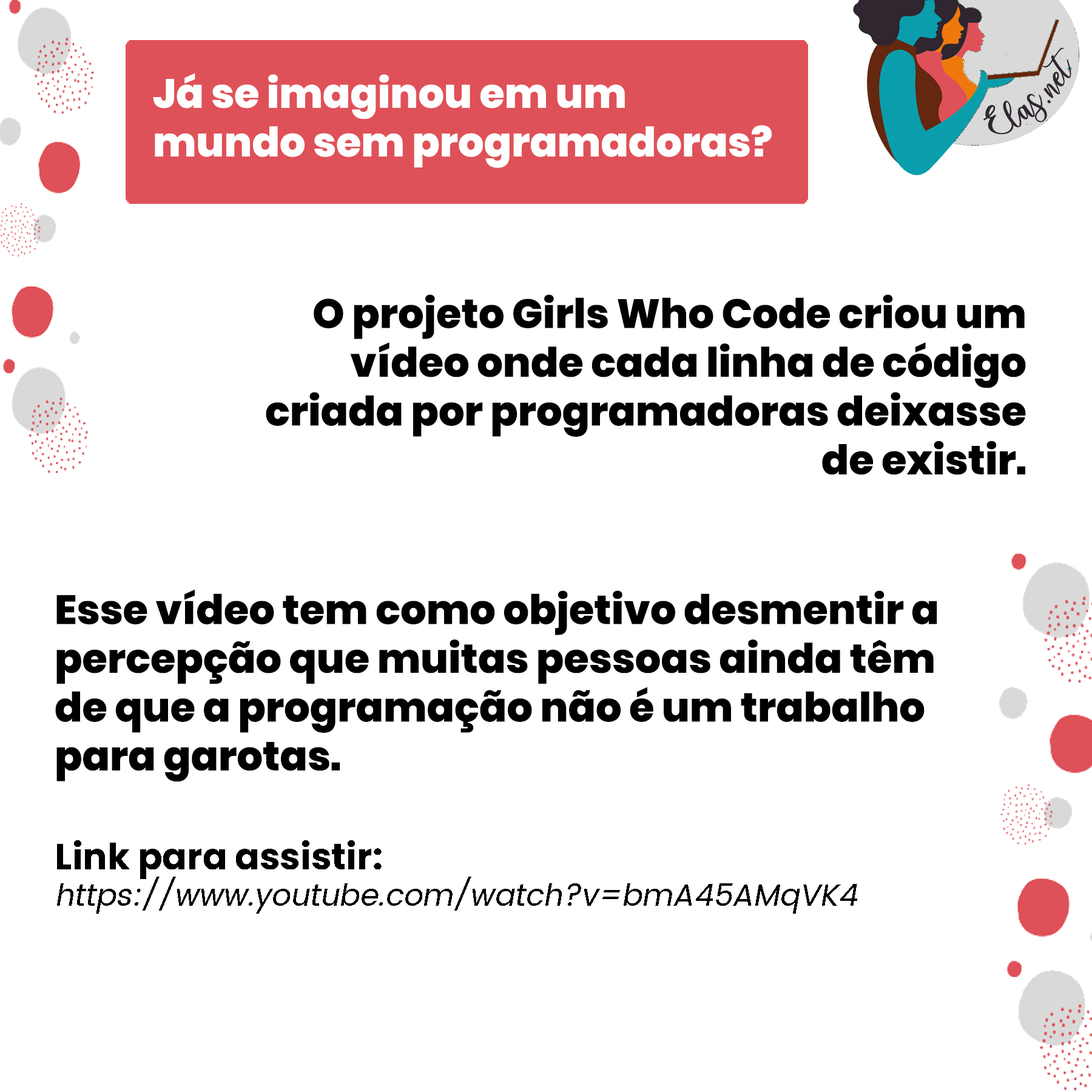
<style>
.page{position:relative;width:1092px;height:1092px;background:#ffffff}
.page>*{position:absolute;margin:0}
.t1{font:25px "charlinda-Regular";color:#2f262f;scale:1.18 1}
.t2{font:40.6px "Poppins-ExtraBold";color:#ffffff}
.t3{font:40.6px "Poppins-ExtraBold";color:#000000}
.t4{font:30.3px "Poppins-Regular";color:#000000;font-style:italic}
.t5{font:36.4px "Poppins-Bold";color:#000000}
.t6{font:36.4px "Poppins-ExtraBold";color:#000000}
</style>
<div class="page">
<p class="t1" style="left:983px;top:47px;width:88px;height:88px;rotate:-42deg">Elas.net</p>
<p class="t2" style="left:153px;top:73px;width:619px;height:95px">Já se imaginou em um mundo sem programadoras?</p>
<p class="t3" style="left:266px;top:294px;width:760px;height:181px;text-align:right">O projeto Girls Who Code criou um vídeo onde cada linha de código criada por programadoras deixasse de existir.</p>
<p class="t3" style="left:55px;top:589px;width:882px;height:193px">Esse vídeo tem como objetivo desmentir a percepção que muitas pessoas ainda têm de que a programação não é um trabalho para garotas.</p>
<p class="t4" style="left:57px;top:840px;width:800px;height:74px"><span class="t5">Link para assistir:       </span><span class="t6">                                                                 <br></span>https://www.youtube.com/watch?v=bmA45AMqVK4</p>
</div>
